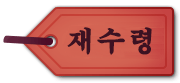
<style>
.page{position:relative;width:180px;height:83px;background:#ffffff}
.page>*{position:absolute;margin:0}
.t1{font:29px "MJemokBatang";letter-spacing:0.02em;color:#3c1222;font-weight:bold}
</style>
<div class="page">
<p class="t1" style="left:67px;top:27px;width:85px;height:28px">재수령</p>
</div>
